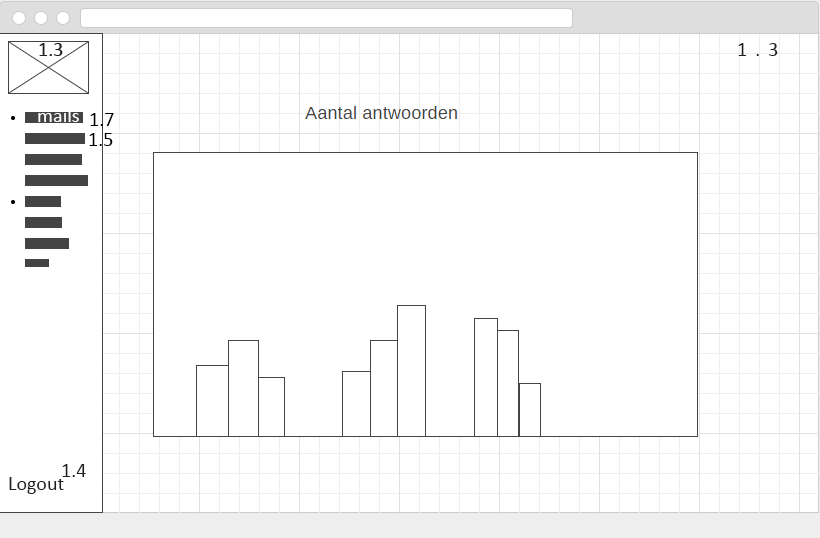
<style>
.page{position:relative;width:820px;height:538px;background:#ffffff}
.page>*{position:absolute;margin:0}
.t1{font:20.1px "Calibri";letter-spacing:0.4em;color:#231f20}
.t2{font:20.1px "Calibri";color:#ffffff}
.t3{font:20.1px "Calibri";color:#000000}
.t4{font:20.1px "Calibri";color:#231f20}
</style>
<div class="page">
<p class="t1" style="left:738px;top:43px;width:40px;height:13px">1.3</p>
<p class="t2" style="left:38px;top:108px;width:41px;height:14px">mails</p>
<p class="t3" style="left:90px;top:113px;width:24px;height:13px">1.7</p>
<p class="t3" style="left:89px;top:133px;width:24px;height:13px">1.5</p>
<p class="t4" style="left:62px;top:464px;width:24px;height:13px">1.4</p>
<p class="t4" style="left:9px;top:477px;width:55px;height:17px">Logout</p>
</div>
